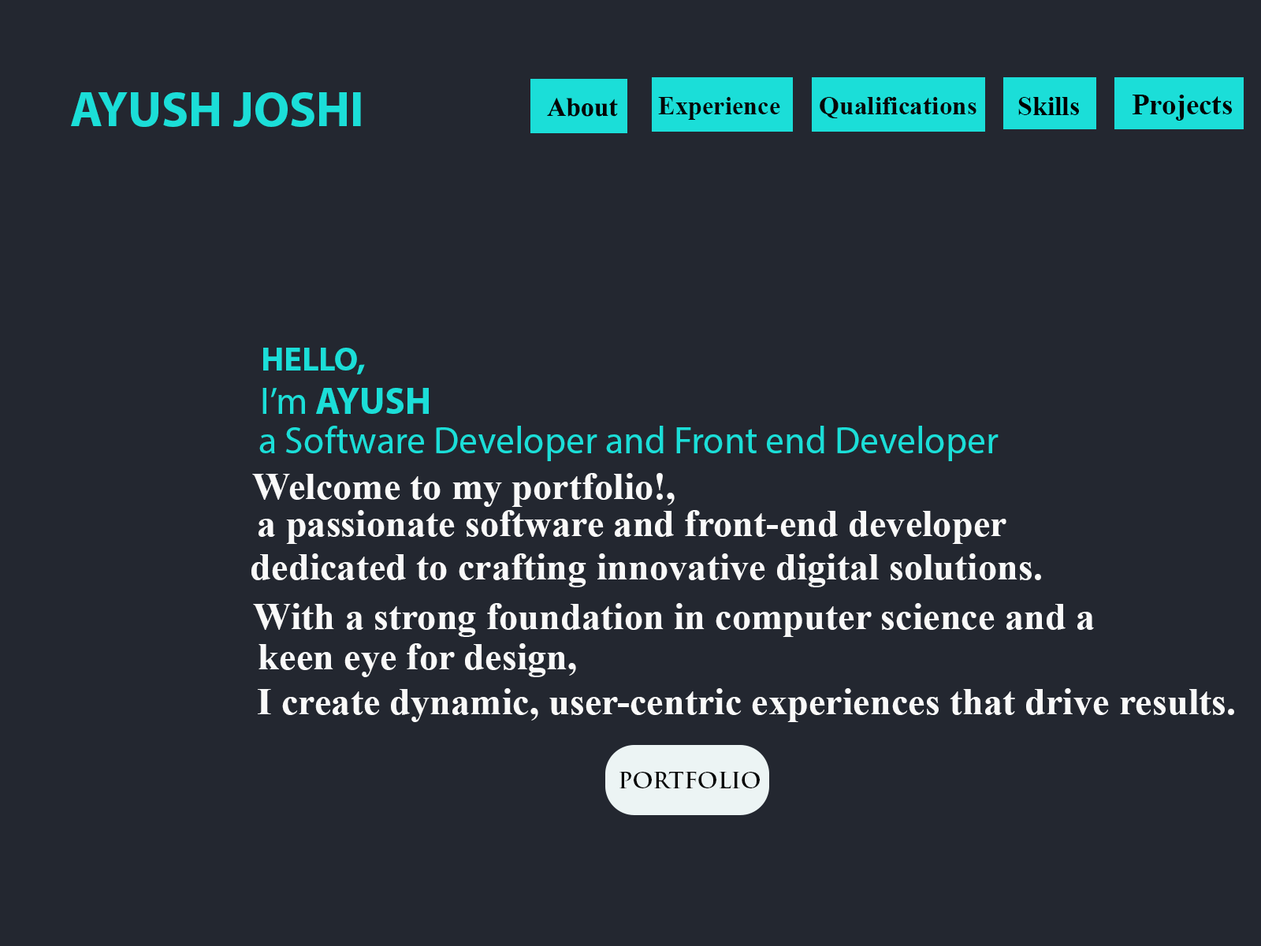
<style>
.page{position:relative;width:1261px;height:946px;background:#232730}
.page>*{position:absolute;margin:0}
.t1{font:49.4px "MyriadPro-Bold";color:#1bded8}
.t2{font:26.5px "TimesNewRomanPS-BoldMT";color:#050505}
.t3{font:25.8px "TimesNewRomanPS-BoldMT";color:#060606}
.t4{font:25.8px "TimesNewRomanPS-BoldMT";color:#070707}
.t5{font:26.5px "TimesNewRomanPS-BoldMT";color:#010101}
.t6{font:29.2px "TimesNewRomanPS-BoldMT";color:#030303}
.t7{font:33.3px "MyriadPro-Bold";color:#1bded8}
.t8{font:37.8px "MyriadPro-Bold";color:#1bded8}
.t9{font:37.8px "MyriadPro-Regular";color:#1bded8}
.t10{font:38.1px "TimesNewRomanPS-BoldMT";color:#f9f9f9}
.t11{font:21.8px "TrajanPro-Bold";color:#050505}
</style>
<div class="page">
<p class="t1" style="left:71px;top:92px;width:290px;height:35px">AYUSH JOSHI</p>
<p class="t2" style="left:547px;top:98px;width:71px;height:19px">About</p>
<p class="t3" style="left:658px;top:97px;width:122px;height:23px">Experience</p>
<p class="t4" style="left:820px;top:97px;width:156px;height:21px">Qualifications</p>
<p class="t5" style="left:1018px;top:97px;width:61px;height:18px">Skills</p>
<p class="t6" style="left:1132px;top:95px;width:101px;height:26px">Projects</p>
<p class="t7" style="left:263px;top:348px;width:102px;height:26px">HELLO,</p>
<p class="t8" style="left:262px;top:388px;width:167px;height:26px"><span class="t9">I’m </span>AYUSH</p>
<p class="t9" style="left:259px;top:426px;width:739px;height:35px">a Software Developer and Front end Developer</p>
<p class="t10" style="left:252px;top:473px;width:423px;height:34px">Welcome to my portfolio!,</p>
<p class="t10" style="left:258px;top:510px;width:748px;height:34px">a passionate software and front-end developer</p>
<p class="t10" style="left:251px;top:553px;width:790px;height:34px">dedicated to crafting innovative digital solutions.</p>
<p class="t10" style="left:253px;top:603px;width:841px;height:34px">With a strong foundation in computer science and a</p>
<p class="t10" style="left:258px;top:643px;width:318px;height:34px">keen eye for design,</p>
<p class="t10" style="left:258px;top:688px;width:976px;height:34px">I create dynamic, user-centric experiences that drive results.</p>
<p class="t11" style="left:619px;top:772px;width:141px;height:16px">PORTFOLIO</p>
</div>
